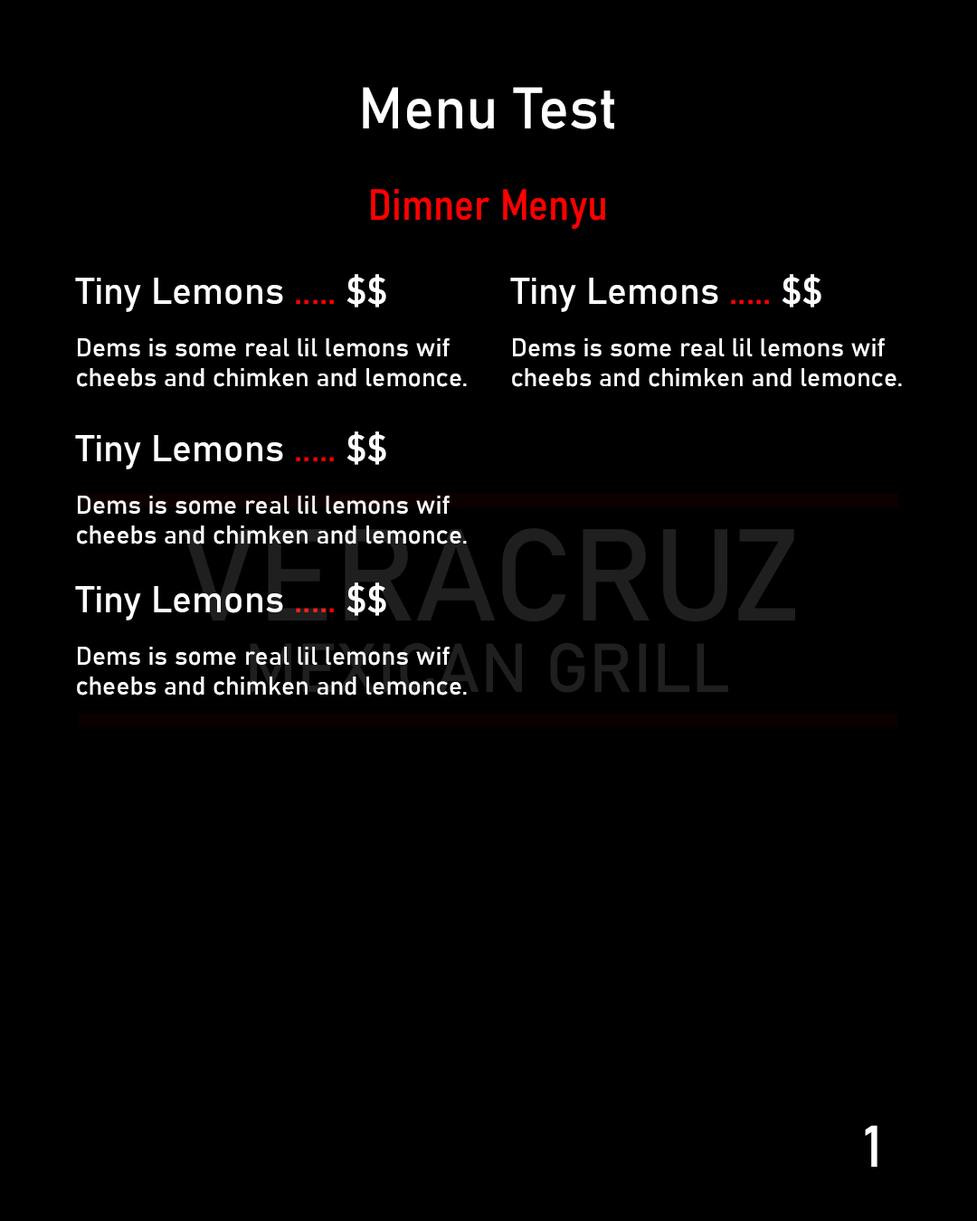
<style>
.page{position:relative;width:977px;height:1221px;background:#000000}
.page>*{position:absolute;margin:0}
.t1{font:57.6px "Bahnschrift";color:#ffffff}
.t2{font:42.9px "Bahnschrift-SemiCondensed";color:#ff0000}
.t3{font:37.1px "Bahnschrift";color:#ffffff}
.t4{font:37.1px "Bahnschrift";color:#ff0000}
.t5{font:25.6px "Bahnschrift";color:#ffffff}
</style>
<div class="page">
<p class="t1" style="left:363px;top:87px;width:251px;height:42px">Menu Test</p>
<p class="t2" style="left:371px;top:189px;width:234px;height:40px">Dimner Menyu</p>
<p class="t3" style="left:75px;top:274px;width:311px;height:38px">Tiny Lemons <span class="t4">.....</span> $$</p>
<p class="t3" style="left:510px;top:274px;width:311px;height:38px">Tiny Lemons <span class="t4">.....</span> $$</p>
<p class="t5" style="left:77px;top:338px;width:390px;height:49px">Dems is some real lil lemons wif<br>cheebs and chimken and lemonce.</p>
<p class="t5" style="left:512px;top:338px;width:390px;height:49px">Dems is some real lil lemons wif<br>cheebs and chimken and lemonce.</p>
<p class="t3" style="left:75px;top:431px;width:311px;height:38px">Tiny Lemons <span class="t4">.....</span> $$</p>
<p class="t5" style="left:77px;top:496px;width:390px;height:48px">Dems is some real lil lemons wif<br>cheebs and chimken and lemonce.</p>
<p class="t3" style="left:75px;top:582px;width:311px;height:38px">Tiny Lemons <span class="t4">.....</span> $$</p>
<p class="t5" style="left:77px;top:647px;width:390px;height:48px">Dems is some real lil lemons wif<br>cheebs and chimken and lemonce.</p>
<p class="t1" style="left:865px;top:1125px;width:12px;height:42px">1</p>
</div>
